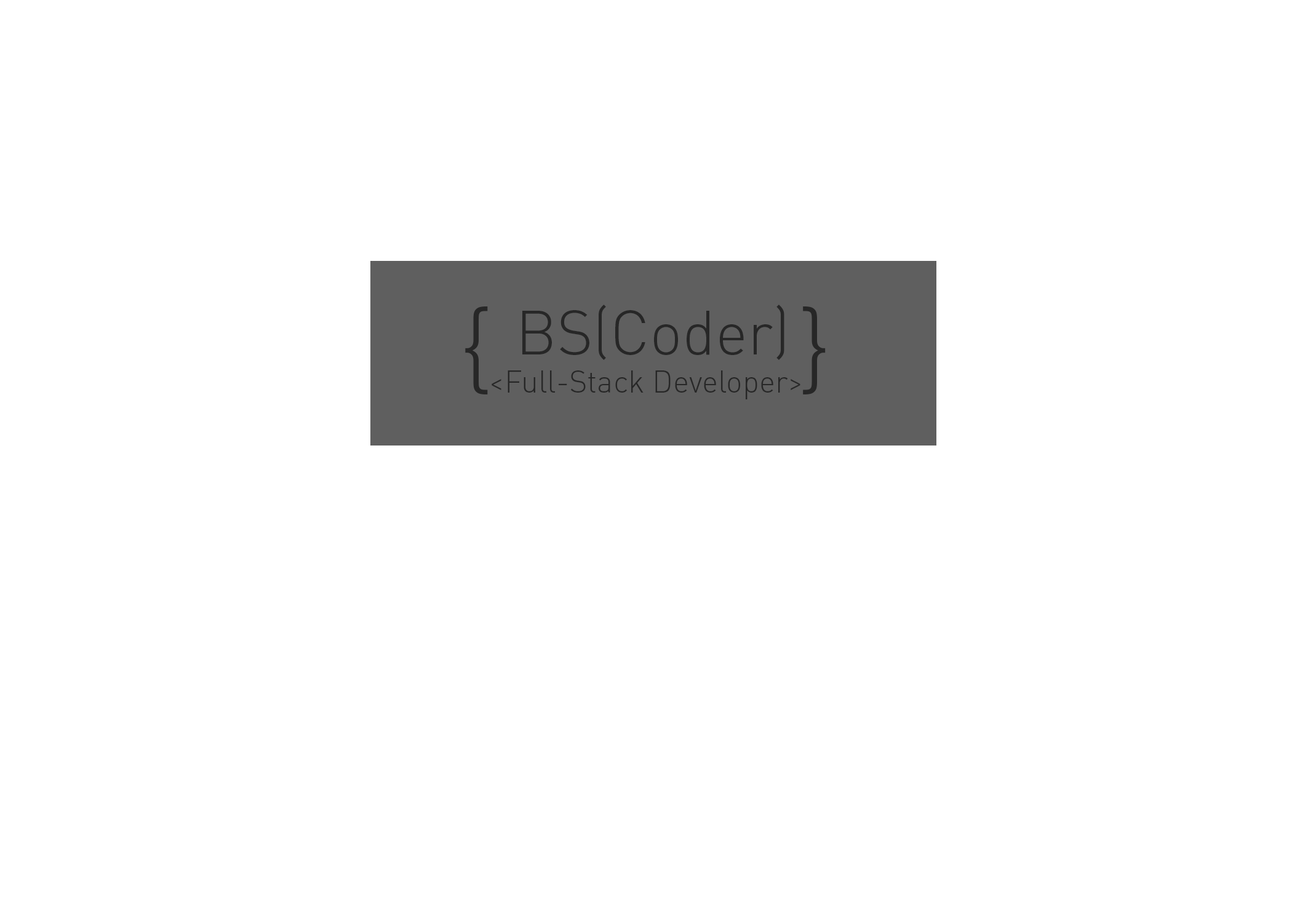
<style>
.page{position:relative;width:1292px;height:923px;background:#ffffff}
.page>*{position:absolute;margin:0}
.t1{font:61.5px "DINPro-Light";color:#272727}
.t2{font:102.5px "DINPro-Light";color:#272727}
.t3{font:30.8px "DINPro-Light";color:#272727}
</style>
<div class="page">
<p class="t1" style="left:522px;top:305px;width:262px;height:55px">BS(Coder)</p>
<p class="t2" style="left:465px;top:306px;width:23px;height:88px">{</p>
<p class="t2" style="left:803px;top:306px;width:23px;height:88px;rotate:180deg">{</p>
<p class="t3" style="left:492px;top:370px;width:308px;height:29px">&lt;Full-Stack Developer&gt;</p>
</div>
